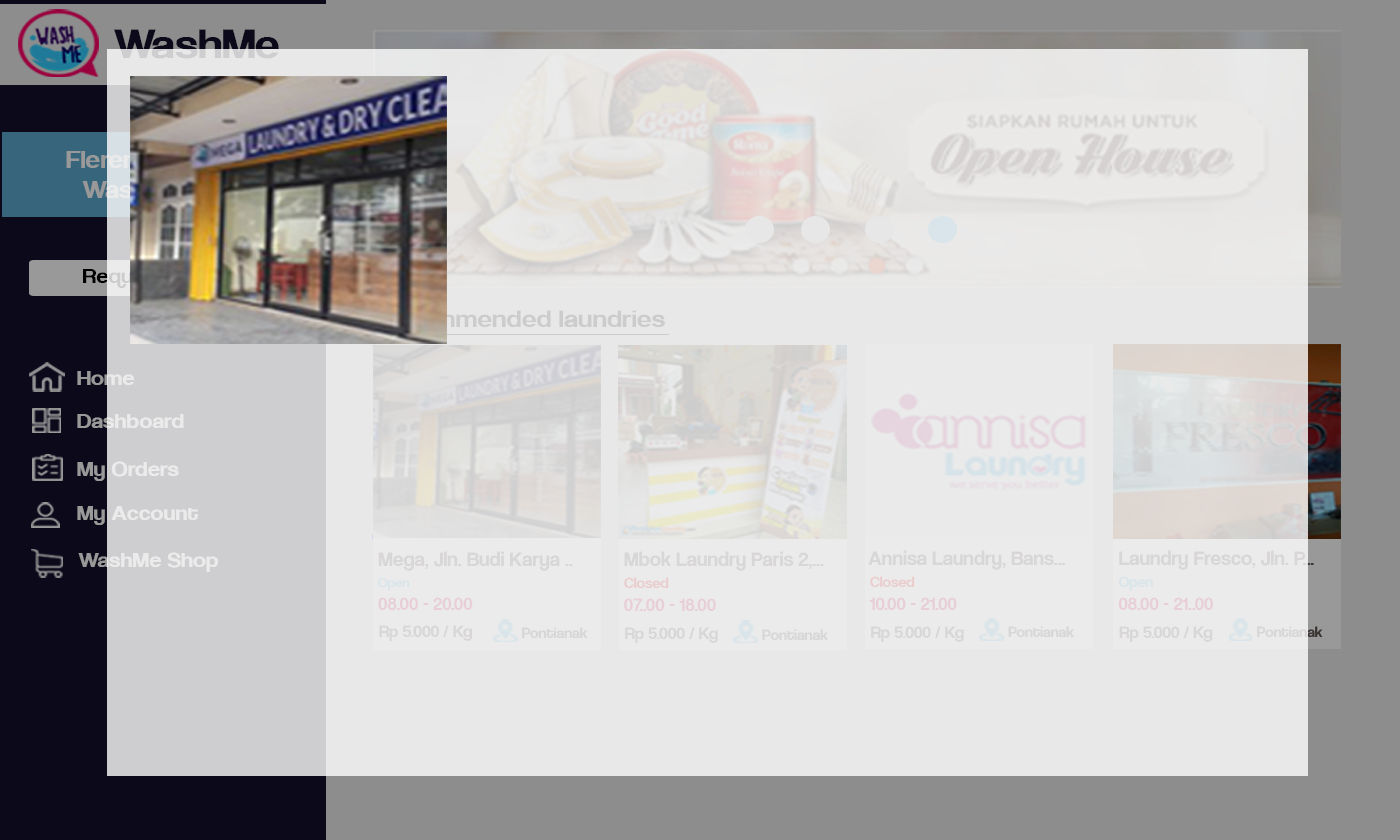
<style>
.page{position:relative;width:1400px;height:840px}
.page>*{position:absolute;margin:0}
.t1{font:41.7px "CoolveticaRg-Regular";color:#120f2b;scale:1.17 1}
.t2{font:20.8px "CoolveticaRg-Regular";scale:1.17 1}
.t3{font:20.8px "CoolveticaRg-Regular";color:#ffffff;scale:1.17 1}
.t4{font:19.9px "CoolveticaRg-Regular";color:#d8d6d6;scale:1.07 1}
.t5{font:12.1px "CoolveticaRg-Regular";color:#d9e5ea;scale:1.2 1}
.t6{font:14.9px "CoolveticaRg-Regular";color:#ebcccd;scale:1.07 1}
.t7{font:14.9px "CoolveticaRg-Regular";color:#d9e5ea;scale:1.07 1}
.t8{font:18.2px "CoolveticaRg-Regular";color:#e8ced7;scale:1.07 1}
.t9{font:16.6px "CoolveticaRg-Regular";color:#d8d6d6;scale:1.07 1}
.t10{font:14.9px "CoolveticaRg-Regular";color:#d8d6d6;scale:1.07 1}
</style>
<div class="page">
<p class="t1" style="left:114px;top:29px;width:165px;height:30px">WashMe</p>
<p class="t2" style="left:77px;top:371px;width:58px;height:14px">Home</p>
<p class="t3" style="left:77px;top:414px;width:107px;height:14px">Dashboard</p>
<p class="t4" style="left:378px;top:551px;width:195px;height:20px">Mega, Jln. Budi Karya ..</p>
<p class="t4" style="left:378px;top:551px;width:195px;height:20px">Mega, Jln. Budi Karya ..</p>
<p class="t4" style="left:624px;top:551px;width:200px;height:20px">Mbok Laundry Paris 2,...</p>
<p class="t4" style="left:624px;top:551px;width:200px;height:20px">Mbok Laundry Paris 2,...</p>
<p class="t4" style="left:868px;top:550px;width:197px;height:20px">Annisa Laundry, Bans...</p>
<p class="t4" style="left:868px;top:550px;width:197px;height:20px">Annisa Laundry, Bans...</p>
<p class="t4" style="left:1119px;top:550px;width:195px;height:20px">Laundry Fresco, Jln. P...</p>
<p class="t4" style="left:1119px;top:550px;width:195px;height:20px">Laundry Fresco, Jln. P...</p>
<p class="t5" style="left:377px;top:578px;width:33px;height:12px">Open</p>
<p class="t6" style="left:624px;top:577px;width:45px;height:11px">Closed</p>
<p class="t6" style="left:624px;top:577px;width:45px;height:11px">Closed</p>
<p class="t6" style="left:870px;top:576px;width:45px;height:11px">Closed</p>
<p class="t6" style="left:870px;top:576px;width:45px;height:11px">Closed</p>
<p class="t7" style="left:1118px;top:576px;width:35px;height:15px">Open</p>
<p class="t8" style="left:378px;top:597px;width:95px;height:13px">08.00 - 20.00</p>
<p class="t8" style="left:378px;top:597px;width:95px;height:13px">08.00 - 20.00</p>
<p class="t8" style="left:624px;top:598px;width:92px;height:13px">07..00 - 18.00</p>
<p class="t8" style="left:624px;top:598px;width:92px;height:13px">07..00 - 18.00</p>
<p class="t8" style="left:869px;top:597px;width:88px;height:13px">10.00 - 21.00</p>
<p class="t8" style="left:869px;top:597px;width:88px;height:13px">10.00 - 21.00</p>
<p class="t8" style="left:1118px;top:597px;width:95px;height:13px">08.00 - 21..00</p>
<p class="t8" style="left:1118px;top:597px;width:95px;height:13px">08.00 - 21..00</p>
<p class="t9" style="left:379px;top:625px;width:93px;height:16px">Rp 5.000 / Kg</p>
<p class="t9" style="left:379px;top:625px;width:93px;height:16px">Rp 5.000 / Kg</p>
<p class="t10" style="left:522px;top:627px;width:66px;height:11px">Pontianak</p>
<p class="t10" style="left:522px;top:627px;width:66px;height:11px">Pontianak</p>
<p class="t9" style="left:625px;top:627px;width:93px;height:16px">Rp 5.000 / Kg</p>
<p class="t9" style="left:625px;top:627px;width:93px;height:16px">Rp 5.000 / Kg</p>
<p class="t10" style="left:762px;top:629px;width:66px;height:11px">Pontianak</p>
<p class="t10" style="left:762px;top:629px;width:66px;height:11px">Pontianak</p>
<p class="t9" style="left:871px;top:626px;width:93px;height:16px">Rp 5.000 / Kg</p>
<p class="t9" style="left:871px;top:626px;width:93px;height:16px">Rp 5.000 / Kg</p>
<p class="t10" style="left:1008px;top:626px;width:66px;height:11px">Pontianak</p>
<p class="t10" style="left:1008px;top:626px;width:66px;height:11px">Pontianak</p>
<p class="t9" style="left:1119px;top:626px;width:94px;height:16px">Rp 5.000 / Kg</p>
<p class="t9" style="left:1119px;top:626px;width:94px;height:16px">Rp 5.000 / Kg</p>
</div>
